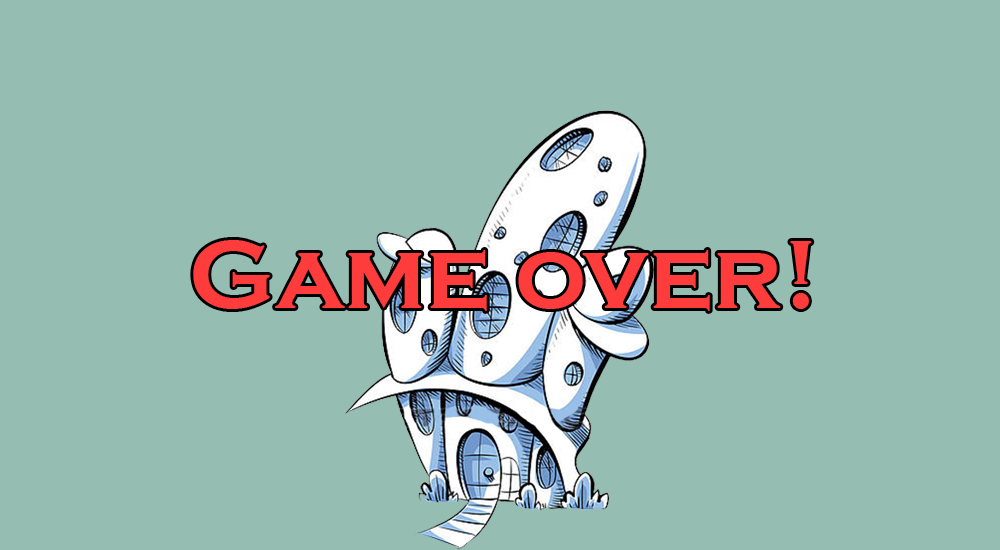
<style>
.page{position:relative;width:1000px;height:550px;background:#96bdb2}
.page>*{position:absolute;margin:0}
.t1{font:100px "CopperplateGothic-Bold";color:#ff3c3c}
</style>
<div class="page">
<p class="t1" style="left:193px;top:240px;width:619px;height:71px">Game over!</p>
</div>
